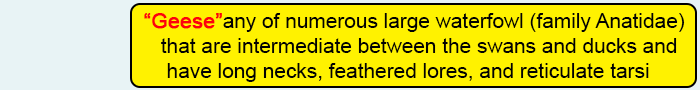
<style>
.page{position:relative;width:700px;height:90px;background:#fff200}
.page>*{position:absolute;margin:0}
.t1{font:20.8px "ArialMT";color:#020202}
.t2{font:20.8px "ArialMT";color:#fd010d;font-weight:bold}
</style>
<div class="page">
<p class="t1" style="left:144px;top:13px;width:541px;height:69px"><span class="t2">“Geese”</span>any of numerous large waterfowl (family Anatidae)<br>   that are intermediate between the swans and ducks and <br>    have long necks, feathered lores, and reticulate tarsi</p>
</div>
